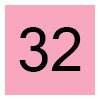
<style>
.page{position:relative;width:100px;height:100px;background:#f8a7bf}
.page>*{position:absolute;margin:0}
.t1{font:60px "MicrosoftSansSerif";color:#000407}
</style>
<div class="page">
<p class="t1" style="left:19px;top:27px;width:62px;height:45px">32</p>
</div>
